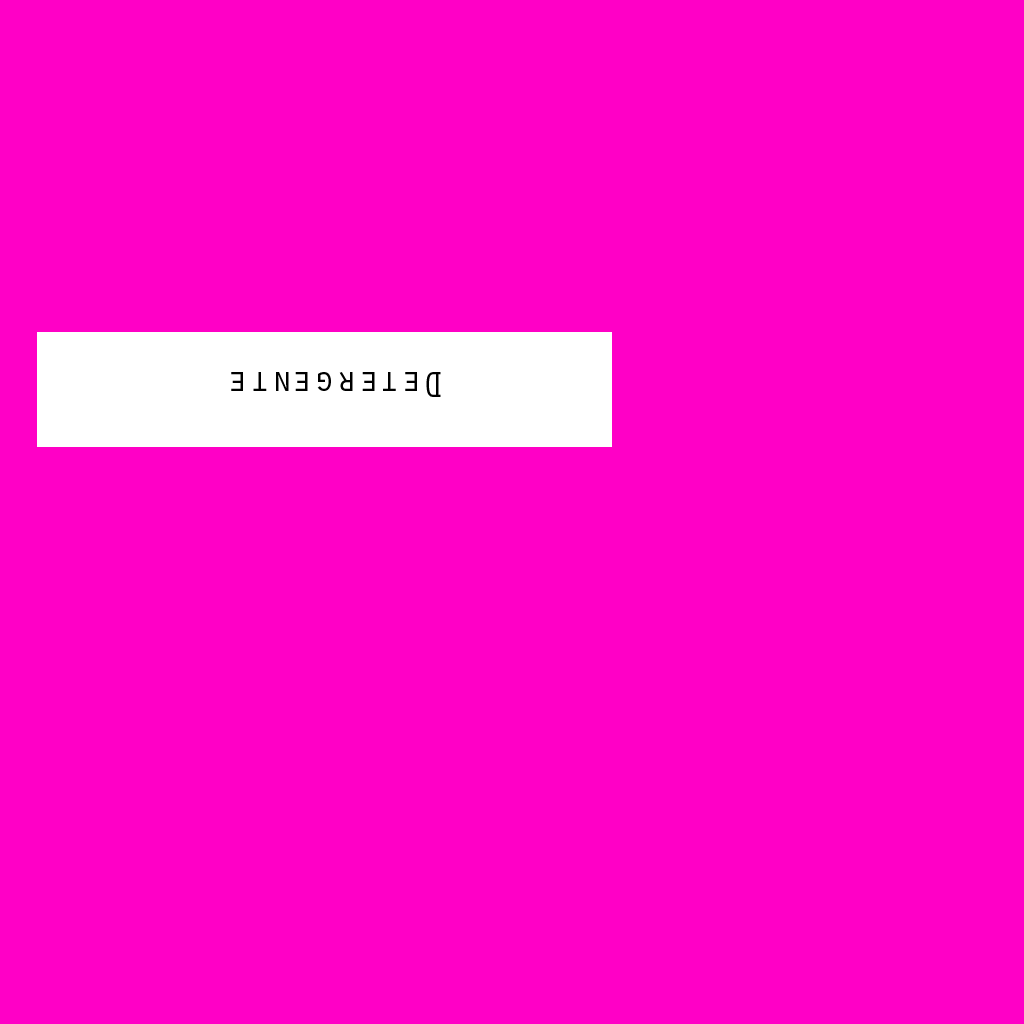
<style>
.page{position:relative;width:1024px;height:1024px;background:#ff00c6}
.page>*{position:absolute;margin:0}
.t1{font:36.2px "OratorStd";color:#000000}
</style>
<div class="page">
<p class="t1" style="left:231px;top:372px;width:210px;height:25px;rotate:-180deg">Detergente</p>
</div>
